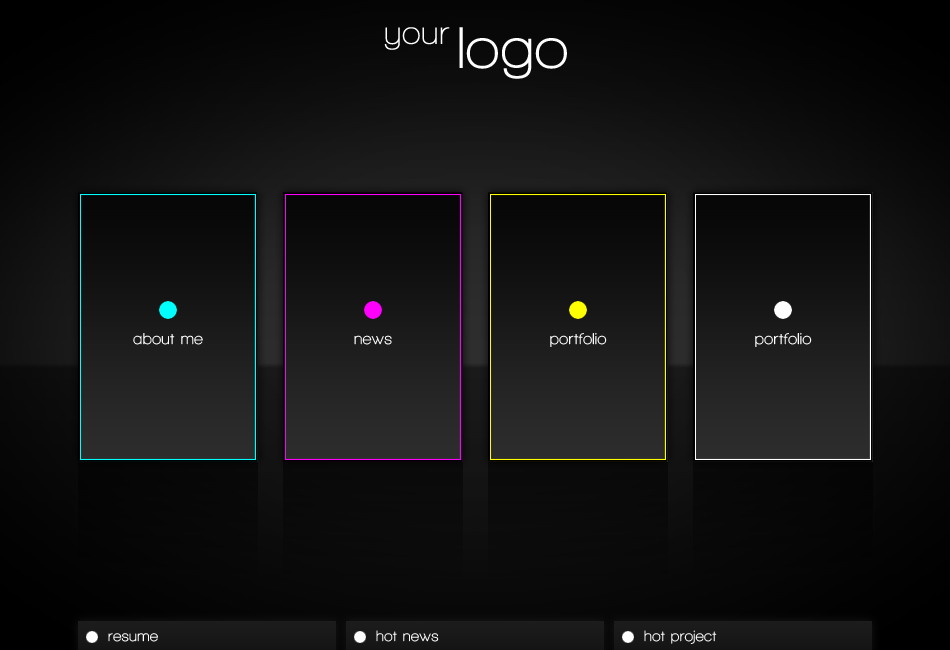
<style>
.page{position:relative;width:950px;height:650px}
.page>*{position:absolute;margin:0}
.t1{font:16px "WalkwaySemiBold";letter-spacing:0.025em;color:#ffffff}
.t2{font:15px "WalkwaySemiBold";letter-spacing:0.025em;color:#ffffff}
</style>
<div class="page">
<p class="t1" style="left:133px;top:333px;width:70px;height:12px">about me</p>
<p class="t1" style="left:354px;top:335px;width:38px;height:10px">news</p>
<p class="t1" style="left:550px;top:332px;width:57px;height:15px">portfolio</p>
<p class="t1" style="left:755px;top:332px;width:57px;height:15px">portfolio</p>
<p class="t2" style="left:376px;top:630px;width:63px;height:12px">hot news</p>
<p class="t2" style="left:644px;top:630px;width:73px;height:14px">hot project</p>
<p class="t2" style="left:108px;top:633px;width:50px;height:9px">resume</p>
</div>
